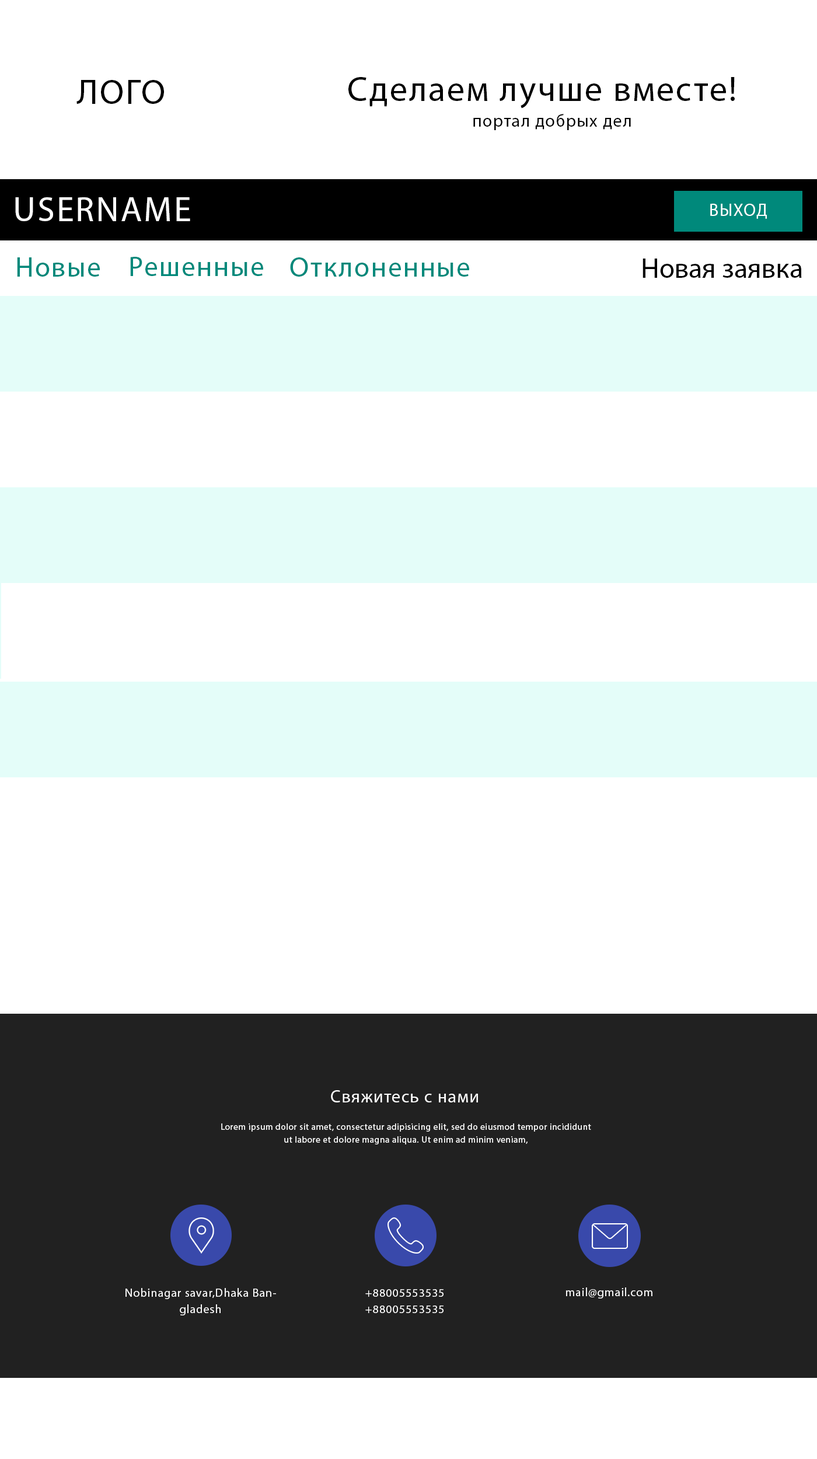
<style>
.page{position:relative;width:817px;height:1459px;background:#ffffff}
.page>*{position:absolute;margin:0}
.t1{font:35px "MyriadPro-Regular";letter-spacing:0.05em;color:#000000}
.t2{font:17.5px "MyriadPro-Regular";letter-spacing:0.05em;color:#000000}
.t3{font:35px "MyriadPro-Regular";letter-spacing:0.05em;color:#ffffff}
.t4{font:17.5px "MyriadPro-Regular";letter-spacing:0.05em;color:#ffffff}
.t5{font:28px "MyriadPro-Regular";letter-spacing:0.05em;color:#00897b}
.t6{font:28px "MyriadPro-Regular";color:#000000}
.t7{font:8.8px/12.8px "MyriadPro-Regular";letter-spacing:0.05em;color:#ffffff}
.t8{font:11.7px/16.3px "MyriadPro-Regular";letter-spacing:0.05em;color:#ffffff}
.t9{font:11.7px "MyriadPro-Regular";letter-spacing:0.05em;color:#ffffff}
</style>
<div class="page">
<p class="t1" style="left:348px;top:77px;width:387px;height:32px">Сделаем лучше вместе!</p>
<p class="t1" style="left:76px;top:80px;width:88px;height:24px">ЛОГО</p>
<p class="t2" style="left:473px;top:114px;width:158px;height:16px">портал добрых дел</p>
<p class="t3" style="left:15px;top:197px;width:175px;height:24px">USERNAME</p>
<p class="t4" style="left:710px;top:204px;width:57px;height:15px">ВЫХОД</p>
<p class="t5" style="left:17px;top:257px;width:83px;height:20px">Новые</p>
<p class="t5" style="left:130px;top:257px;width:133px;height:19px">Решенные</p>
<p class="t5" style="left:290px;top:257px;width:179px;height:20px">Отклоненные</p>
<p class="t6" style="left:643px;top:259px;width:159px;height:19px">Новая заявка</p>
<p class="t4" style="left:331px;top:1090px;width:147px;height:13px">Свяжитесь с нами</p>
<p class="t7" style="left:221px;top:1124px;width:370px;height:21px;text-align:center">Lorem ipsum dolor sit amet, consectetur adipisicing elit, sed do eiusmod tempor incididunt ut labore et dolore magna aliqua. Ut enim ad minim veniam,</p>
<p class="t8" style="left:125px;top:1288px;width:151px;height:28px;text-align:center">Nobinagar savar,Dhaka Bangladesh</p>
<p class="t8" style="left:365px;top:1289px;width:79px;height:24px;text-align:center">+88005553535<br>+88005553535</p>
<p class="t9" style="left:566px;top:1288px;width:87px;height:11px">mail@gmail.com</p>
</div>
